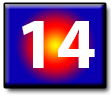
<style>
.page{position:relative;width:111px;height:96px}
.page>*{position:absolute;margin:0}
.t1{font:72px "MyriadPro-Bold";color:#ffffff}
</style>
<div class="page">
<p class="t1" style="left:22px;top:21px;width:73px;height:47px">14</p>
</div>
